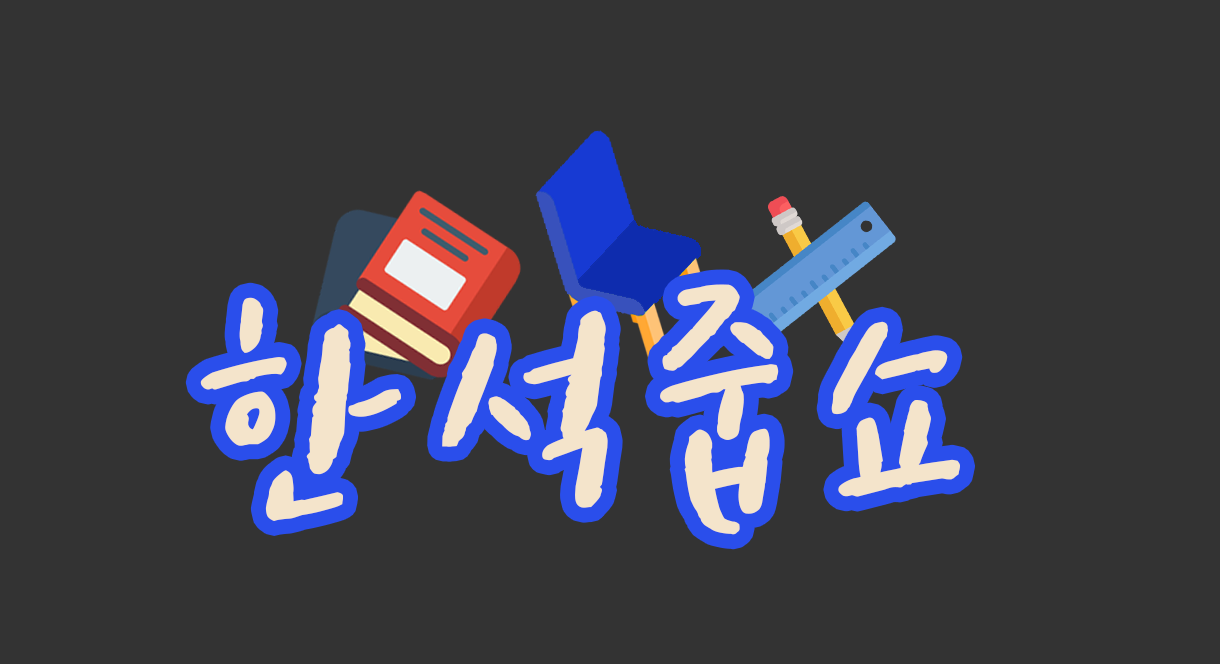
<style>
.page{position:relative;width:1220px;height:664px;background:#333333}
.page>*{position:absolute;margin:0}
.t1{font:312.5px "tvNEnjoystoriesB";color:#f4e4cb}
</style>
<div class="page">
<p class="t1" style="left:660px;top:284px;width:119px;height:251px">줍</p>
<p class="t1" style="left:200px;top:297px;width:201px;height:224px">한</p>
<p class="t1" style="left:442px;top:310px;width:166px;height:198px">석</p>
<p class="t1" style="left:831px;top:321px;width:129px;height:176px">쇼</p>
</div>
